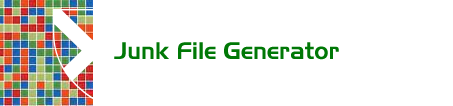
<style>
.page{position:relative;width:453px;height:106px;background:#ffffff}
.page>*{position:absolute;margin:0}
.t1{font:24px "Slicker";color:#007806}
</style>
<div class="page">
<p class="t1" style="left:114px;top:42px;width:225px;height:18px">Junk File Generator</p>
</div>
